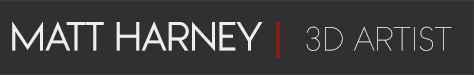
<style>
.page{position:relative;width:474px;height:75px;background:#303030}
.page>*{position:absolute;margin:0}
.t1{font:9.2px "WatchwordRegularDemo";color:#eeeeee}
.t2{font:9.2px "WatchwordRegularDemo";color:#9f1313}
.t3{font:31.9px "WatchwordThinDemo";color:#eeeeee}
</style>
<div class="page">
<p class="t1" style="left:12px;top:21px;width:440px;height:37px">MATT HARNEY <span class="t2">|  </span><span class="t3">3D ARTIST</span></p>
</div>
